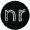
<style>
.page{position:relative;width:30px;height:30px;background:#0a0c0c}
.page>*{position:absolute;margin:0}
.t1{font:24px "CabinSketch";color:#bababa}
</style>
<div class="page">
<p class="t1" style="left:4px;top:9px;width:22px;height:13px">nr</p>
</div>
